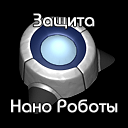
<style>
.page{position:relative;width:128px;height:128px;background:#000000}
.page>*{position:absolute;margin:0}
.t1{font:18px "BauhausC-Medium";color:#ffffff;font-weight:bold}
</style>
<div class="page">
<p class="t1" style="left:33px;top:13px;width:62px;height:16px">Защита</p>
<p class="t1" style="left:11px;top:99px;width:107px;height:14px">Нано Роботы</p>
</div>
